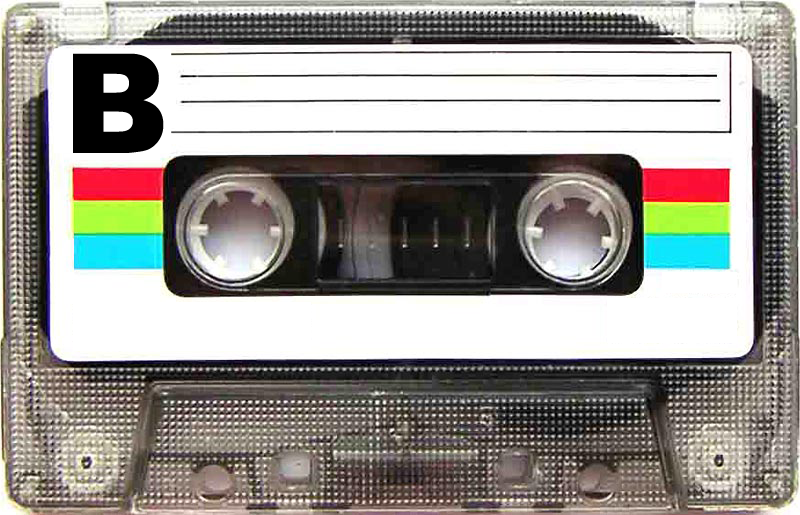
<style>
.page{position:relative;width:800px;height:515px}
.page>*{position:absolute;margin:0}
.t1{font:138.6px "Arial-Black";color:#000000}
</style>
<div class="page">
<p class="t1" style="left:73px;top:53px;width:91px;height:100px">B</p>
</div>
